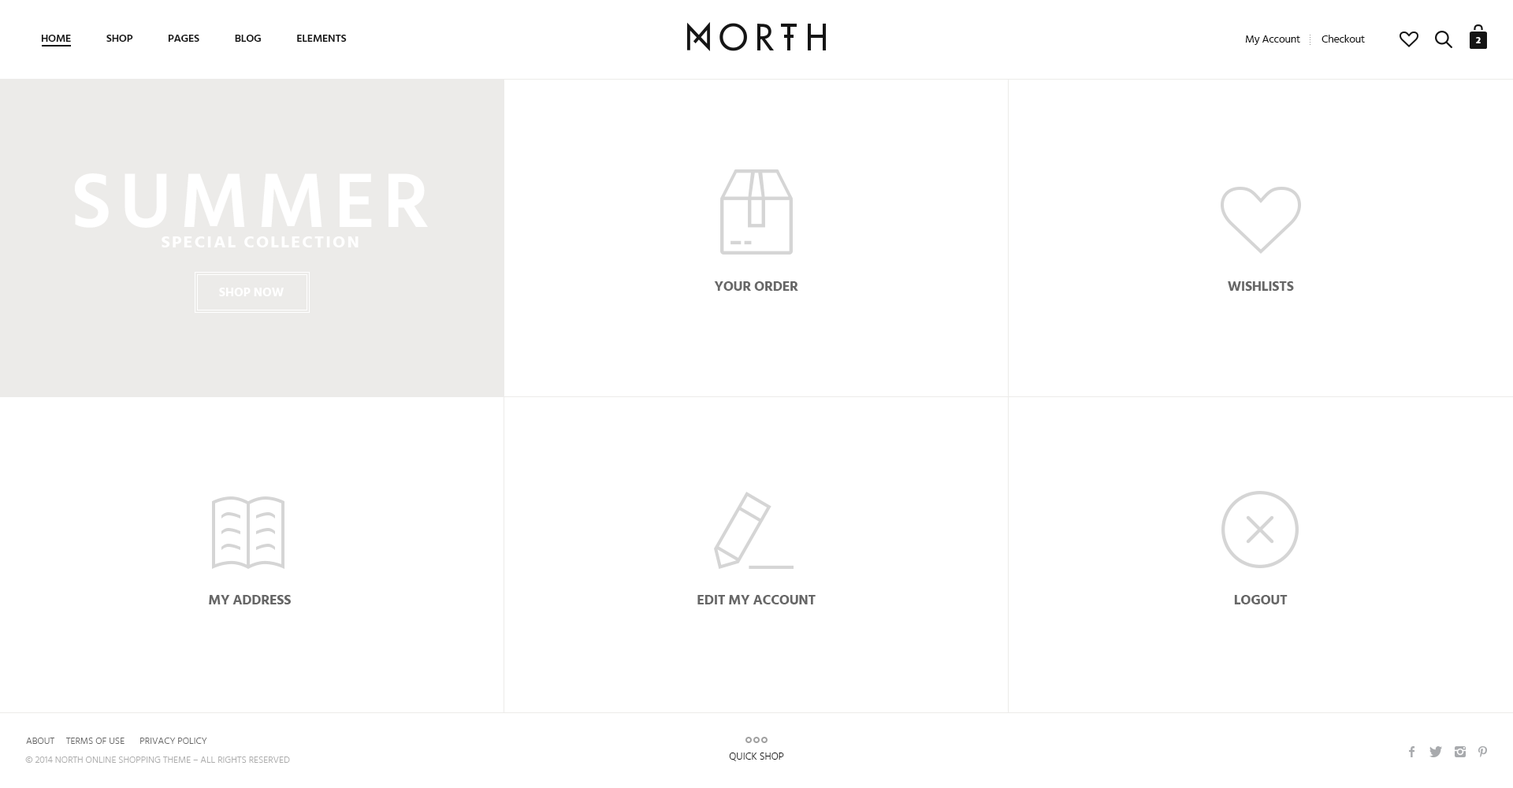
<style>
.page{position:relative;width:1513px;height:788px;background:#ffffff}
.page>*{position:absolute;margin:0}
.t1{font:11px "Hind-Semibold";letter-spacing:-0.02em;color:#141414;text-transform:uppercase}
.t2{font:11px "Hind-Regular";letter-spacing:-0.02em;color:#141414}
.t3{font:8.7px "ArialMT";color:#919191}
.t4{font:9.5px "Hind-Bold";letter-spacing:-0.02em;color:#ffffff;text-transform:uppercase}
.t5{font:78.8px "Hind-Semibold";letter-spacing:0.1em;color:#ffffff}
.t6{font:17.3px "Hind-Bold";letter-spacing:0.1em;color:#ffffff}
.t7{font:14.2px "Hind-Bold";letter-spacing:-0.02em;color:#676767;text-transform:uppercase}
.t8{font:12.6px "Hind-Bold";color:#ffffff;text-transform:uppercase}
.t9{font:9.5px "Hind-Light";color:#666666;text-transform:uppercase}
.t10{font:9.5px "Hind-Light";color:#adadad;text-transform:uppercase}
.t11{font:10.2px "Hind-Light";color:#151515;text-transform:uppercase}
</style>
<div class="page">
<p class="t1" style="left:41px;top:35px;width:306px;height:7px">HOME              SHOP              PAGES              BLOG              ELEMENTS</p>
<p class="t2" style="left:1245px;top:35px;width:55px;height:10px">My Account</p>
<p class="t3" style="left:1310px;top:35px;width:1px;height:10px;rotate:-90deg">.....</p>
<p class="t2" style="left:1322px;top:35px;width:43px;height:8px">Checkout</p>
<p class="t4" style="left:1476px;top:37px;width:5px;height:6px">2</p>
<p class="t5" style="left:75px;top:173px;width:353px;height:55px">SUMMER</p>
<p class="t6" style="left:162px;top:236px;width:197px;height:11px">SPECIAL COLLECTION</p>
<p class="t7" style="left:714px;top:281px;width:84px;height:10px">YOUR ORDER</p>
<p class="t7" style="left:1228px;top:281px;width:66px;height:10px">WISHLISTS</p>
<p class="t8" style="left:219px;top:288px;width:65px;height:8px">SHOP NOW</p>
<p class="t7" style="left:209px;top:595px;width:82px;height:9px">MY ADDRESS</p>
<p class="t7" style="left:697px;top:595px;width:119px;height:9px">EDIT MY ACCOUNT</p>
<p class="t7" style="left:1234px;top:595px;width:54px;height:9px">LOGOUT</p>
<p class="t9" style="left:26px;top:738px;width:28px;height:6px">ABOUT</p>
<p class="t9" style="left:66px;top:738px;width:59px;height:6px">TERMS OF USE</p>
<p class="t9" style="left:140px;top:738px;width:67px;height:6px">PRIVACY POLICY</p>
<p class="t10" style="left:25px;top:757px;width:265px;height:6px">© 2014 NORTH ONLINE SHOPPING THEME – All Rights Reserved</p>
<p class="t11" style="left:729px;top:753px;width:55px;height:8px">QUICK SHOP</p>
</div>
